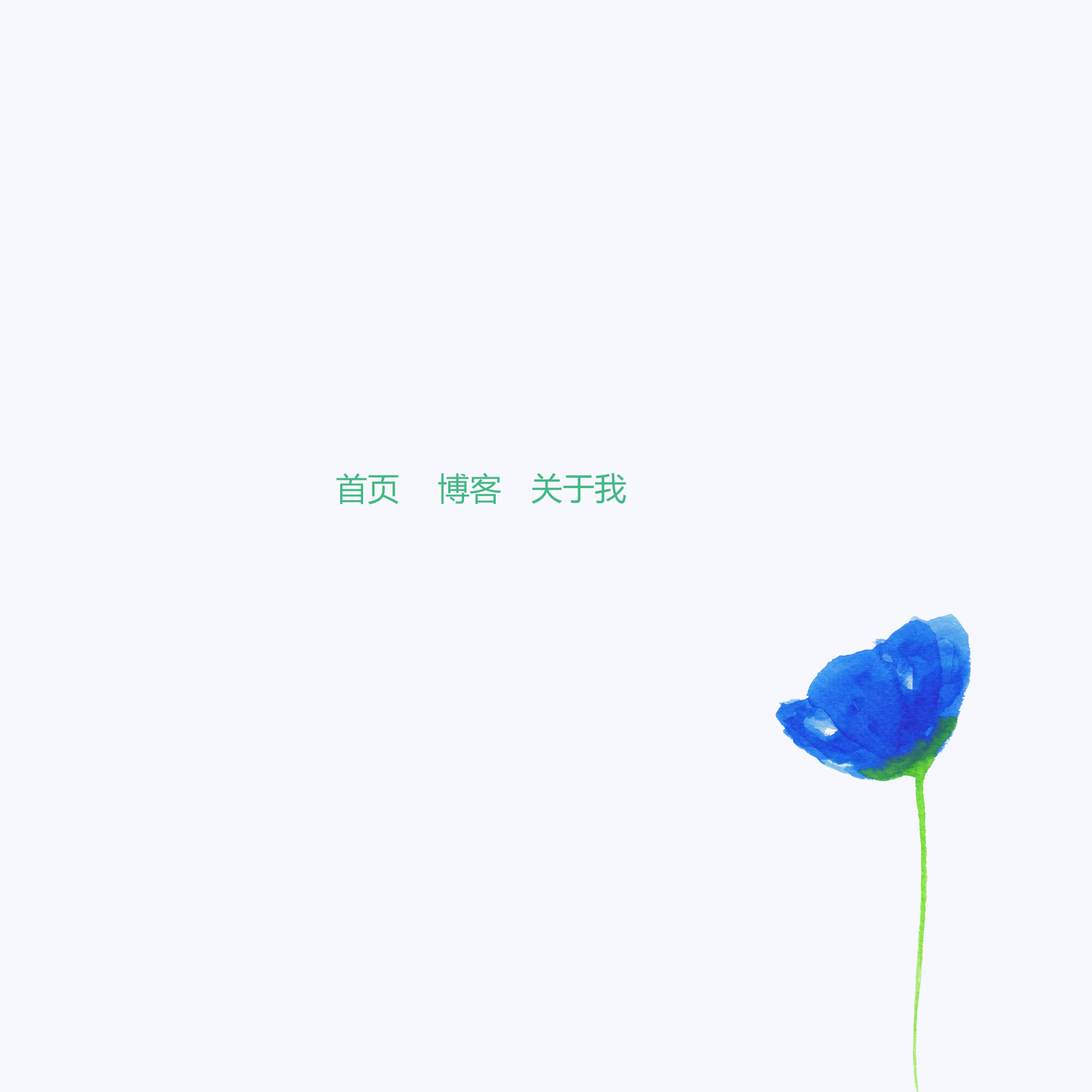
<style>
.page{position:relative;width:1092px;height:1092px;background:#f7f8fd}
.page>*{position:absolute;margin:0}
.t1{font:31.8px "MicrosoftYaHei";color:#42b983}
</style>
<div class="page">
<p class="t1" style="left:336px;top:473px;width:63px;height:31px">首页</p>
<p class="t1" style="left:438px;top:473px;width:63px;height:31px">博客</p>
<p class="t1" style="left:531px;top:473px;width:95px;height:31px">关于我</p>
</div>
